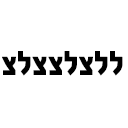
<style>
.page{position:relative;width:128px;height:128px;background:#ffffff}
.page>*{position:absolute;margin:0}
.t1{font:37.9px "FbAlbatros-Black";color:#000000;scale:0.8 1}
</style>
<div class="page">
<p class="t1" style="left:2px;top:51px;width:121px;height:25px">ללצלצצלצ</p>
</div>
